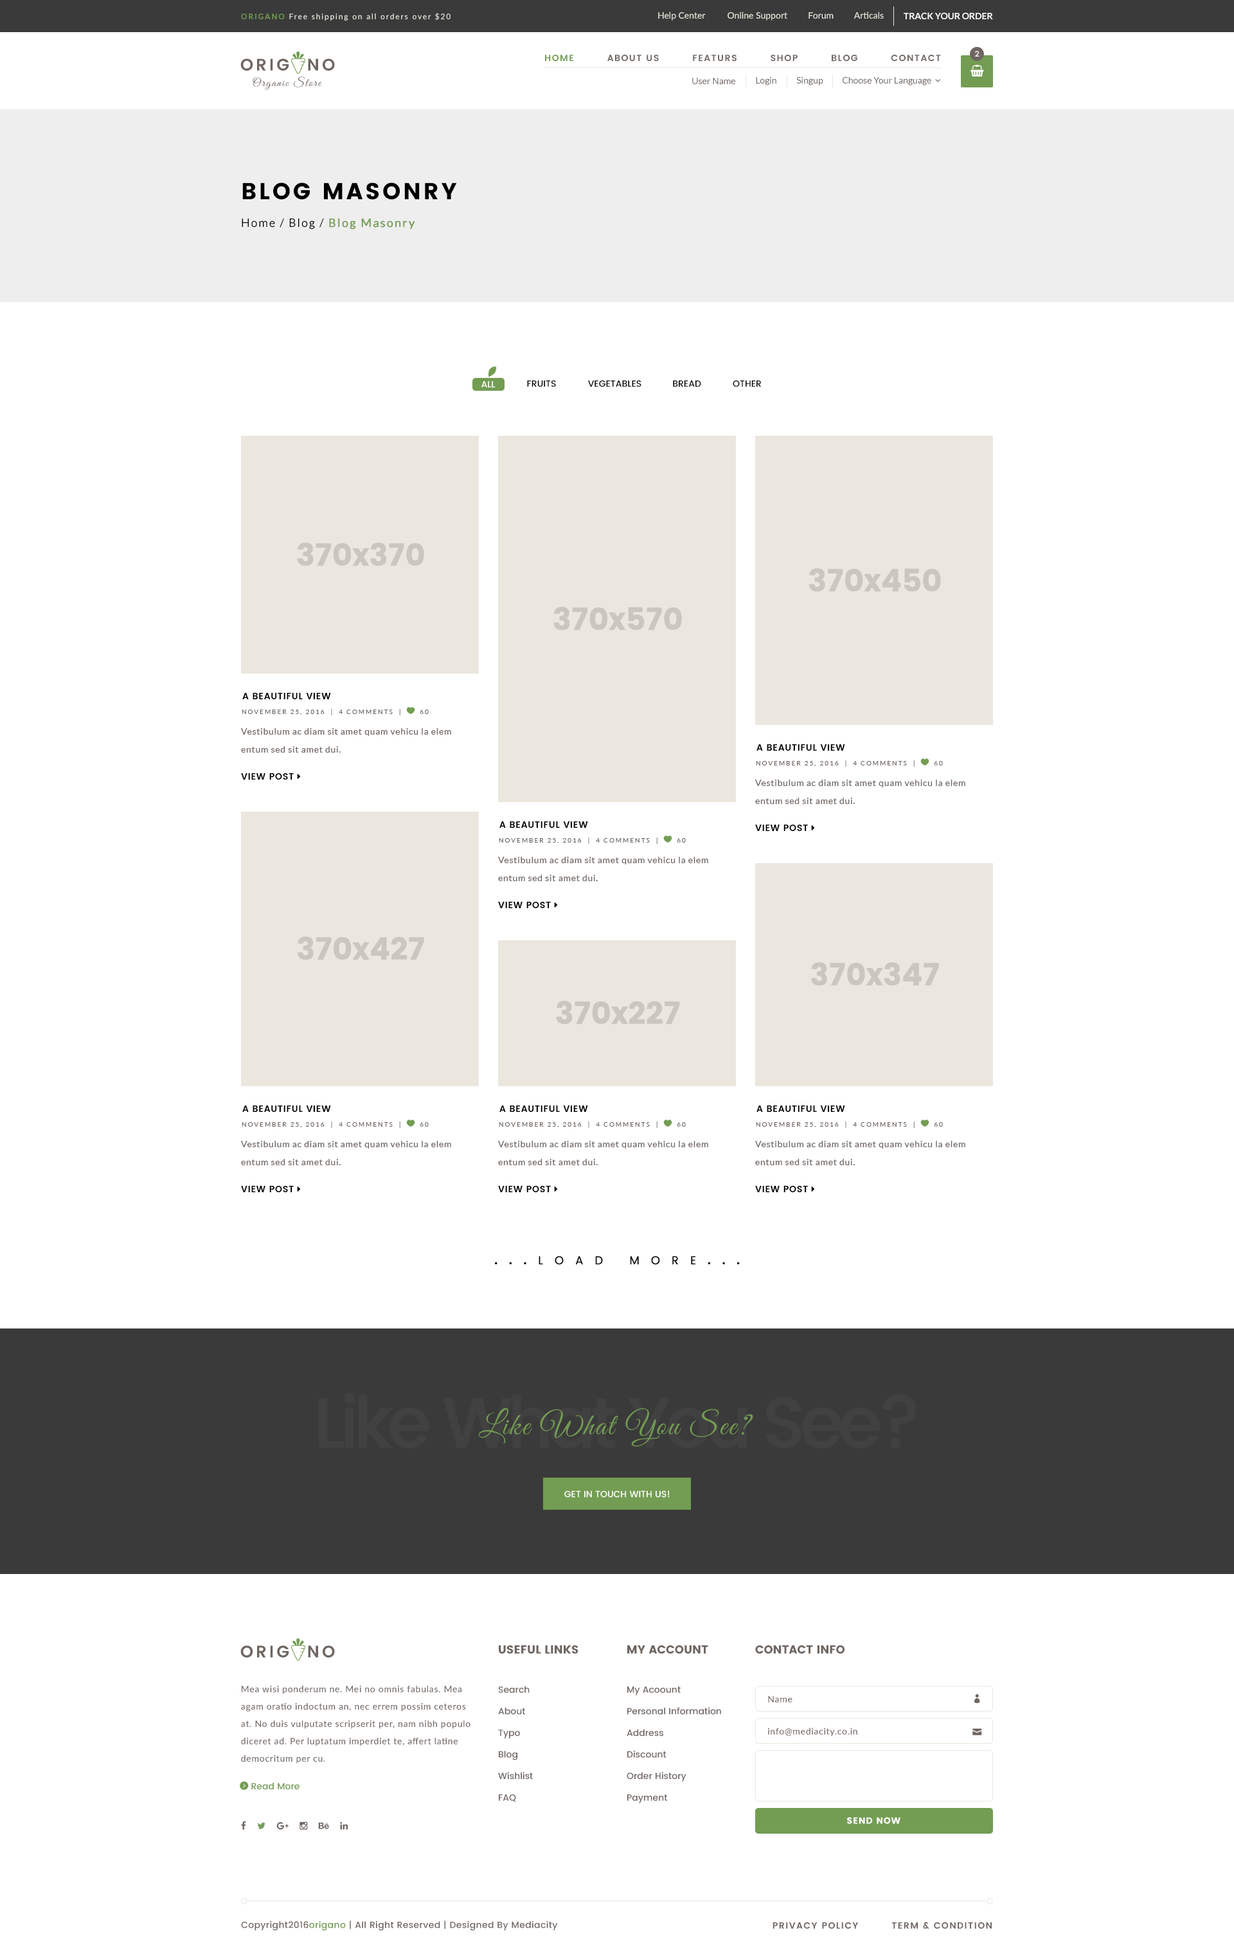
<style>
.page{position:relative;width:1234px;height:1950px;background:#ffffff}
.page>*{position:absolute;margin:0}
.t1{font:7.7px "Lato-Medium";letter-spacing:0.15em;color:#ebe7de}
.t2{font:7.7px "Lato-Bold";letter-spacing:0.15em;color:#739d52}
.t3{font:9px "Lato-Medium";color:#ebe7de}
.t4{font:9px "Lato-Bold";color:#ffffff;text-transform:uppercase}
.t5{font:7.7px "Poppins-Medium";color:#ffffff}
.t6{font:16.7px "Poppins-SemiBold";letter-spacing:0.15em;color:#6f6661}
.t7{font:9px "Poppins-SemiBold";letter-spacing:0.1em;color:#6f6661;text-transform:uppercase}
.t8{font:9px "Poppins-SemiBold";letter-spacing:0.1em;color:#739d52;text-transform:uppercase}
.t9{font:11.6px "GreatVibes-Regular";letter-spacing:0.102em;color:#6f6661}
.t10{font:9px "Lato-Regular";color:#6f6661}
.t11{font:23.1px "Poppins";letter-spacing:0.1em;color:#000000;text-transform:uppercase}
.t12{font:11.6px "Lato-Regular";letter-spacing:0.1em;color:#000000}
.t13{font:11.6px "Lato-Regular";letter-spacing:0.1em;color:#739d52;font-weight:bold}
.t14{font:9px "Poppins-Medium";color:#ffffff;text-transform:uppercase}
.t15{font:9px "Poppins-Medium";color:#000000;text-transform:uppercase}
.t16{font:30.9px "Poppins";color:#cbc6be}
.t17{font:9px "Poppins-SemiBold";letter-spacing:0.05em;color:#000000;text-transform:uppercase}
.t18{font:6.4px "Lato-Regular";letter-spacing:0.2em;color:#6f6661;text-transform:uppercase}
.t19{font:9px/18px "Lato-Regular";letter-spacing:0.05em;color:#6f6661}
.t20{font:11.6px "Poppins-Regular";letter-spacing:1em;color:#000000;text-transform:uppercase}
.t21{font:11.6px "Poppins";letter-spacing:1em;color:#000000;text-transform:uppercase}
.t22{font:70.7px "Poppins-Medium";letter-spacing:-0.1em;color:#414141;font-weight:bold}
.t23{font:30.9px "GreatVibes-Regular";letter-spacing:0.05em;color:#739d52}
.t24{font:11.6px "Poppins";color:#6f6661;text-transform:uppercase}
.t25{font:9px/17.4px "Lato-Medium";letter-spacing:0.05em;color:#6f6661}
.t26{font:9px "Poppins-Medium";color:#6f6661}
.t27{font:9px "Lato-Medium";letter-spacing:0.05em;color:#6f6661}
.t28{font:9px "Poppins";letter-spacing:0.05em;color:#ffffff;text-transform:uppercase}
.t29{font:9px "Poppins-Medium";letter-spacing:0.025em;color:#6f6661}
.t30{font:9px "Poppins-Medium";letter-spacing:0.025em;color:#739d52}
</style>
<div class="page">
<p class="t1" style="left:241px;top:13px;width:210px;height:8px"><span class="t2">ORIGANO </span>Free shipping on all orders over $20</p>
<p class="t3" style="left:658px;top:12px;width:48px;height:9px">Help Center</p>
<p class="t3" style="left:728px;top:12px;width:60px;height:9px">Online Support</p>
<p class="t3" style="left:809px;top:12px;width:25px;height:7px">Forum</p>
<p class="t3" style="left:854px;top:12px;width:30px;height:7px">Articals</p>
<p class="t4" style="left:904px;top:12px;width:89px;height:7px">Track Your Order</p>
<p class="t5" style="left:975px;top:51px;width:5px;height:6px">2</p>
<p class="t6" style="left:240px;top:59px;width:95px;height:12px">ORIG  NO</p>
<p class="t7" style="left:545px;top:55px;width:396px;height:6px"><span class="t8">Home         </span>About Us         Featurs         Shop         Blog         Contact</p>
<p class="t9" style="left:253px;top:76px;width:69px;height:14px">Organic Store</p>
<p class="t10" style="left:692px;top:78px;width:43px;height:6px">User Name</p>
<p class="t10" style="left:756px;top:76px;width:21px;height:10px">Login</p>
<p class="t10" style="left:797px;top:76px;width:27px;height:10px">Singup</p>
<p class="t11" style="left:242px;top:183px;width:215px;height:17px">Blog Masonry</p>
<p class="t12" style="left:242px;top:218px;width:173px;height:12px">Home / Blog / <span class="t13">Blog Masonry</span></p>
<p class="t14" style="left:482px;top:381px;width:14px;height:7px">All</p>
<p class="t15" style="left:527px;top:381px;width:29px;height:6px">Fruits</p>
<p class="t15" style="left:588px;top:381px;width:54px;height:6px">Vegetables</p>
<p class="t15" style="left:673px;top:381px;width:28px;height:6px">Bread</p>
<p class="t15" style="left:733px;top:381px;width:28px;height:6px">Other</p>
<p class="t16" style="left:297px;top:543px;width:127px;height:23px">370x370</p>
<p class="t16" style="left:809px;top:568px;width:132px;height:24px">370x450</p>
<p class="t16" style="left:554px;top:607px;width:128px;height:24px">370x570</p>
<p class="t17" style="left:242px;top:693px;width:89px;height:6px">A BEAUTIFUL VIEW</p>
<p class="t18" style="left:242px;top:709px;width:187px;height:7px">November 25, 2016  |  4 comments  |       60</p>
<p class="t19" style="left:240px;top:728px;width:211px;height:25px">Vestibulum ac diam sit amet quam vehicu la elem entum sed sit amet dui.</p>
<p class="t17" style="left:757px;top:744px;width:88px;height:7px">A BEAUTIFUL VIEW</p>
<p class="t18" style="left:756px;top:760px;width:187px;height:7px">November 25, 2016  |  4 comments  |       60</p>
<p class="t19" style="left:755px;top:780px;width:211px;height:24px">Vestibulum ac diam sit amet quam vehicu la elem entum sed sit amet dui.</p>
<p class="t17" style="left:500px;top:822px;width:88px;height:6px">A BEAUTIFUL VIEW</p>
<p class="t18" style="left:499px;top:838px;width:187px;height:6px">November 25, 2016  |  4 comments  |       60</p>
<p class="t19" style="left:498px;top:857px;width:210px;height:24px">Vestibulum ac diam sit amet quam vehicu la elem entum sed sit amet dui.</p>
<p class="t16" style="left:298px;top:937px;width:126px;height:23px">370x427</p>
<p class="t16" style="left:811px;top:962px;width:128px;height:24px">370x347</p>
<p class="t16" style="left:556px;top:1001px;width:124px;height:24px">370x227</p>
<p class="t17" style="left:242px;top:1106px;width:89px;height:6px">A BEAUTIFUL VIEW</p>
<p class="t17" style="left:500px;top:1106px;width:88px;height:6px">A BEAUTIFUL VIEW</p>
<p class="t17" style="left:757px;top:1106px;width:88px;height:6px">A BEAUTIFUL VIEW</p>
<p class="t18" style="left:242px;top:1122px;width:187px;height:6px">November 25, 2016  |  4 comments  |       60</p>
<p class="t18" style="left:499px;top:1122px;width:187px;height:6px">November 25, 2016  |  4 comments  |       60</p>
<p class="t18" style="left:756px;top:1122px;width:187px;height:6px">November 25, 2016  |  4 comments  |       60</p>
<p class="t19" style="left:240px;top:1141px;width:211px;height:25px">Vestibulum ac diam sit amet quam vehicu la elem entum sed sit amet dui.</p>
<p class="t19" style="left:498px;top:1141px;width:210px;height:25px">Vestibulum ac diam sit amet quam vehicu la elem entum sed sit amet dui.</p>
<p class="t19" style="left:755px;top:1141px;width:211px;height:25px">Vestibulum ac diam sit amet quam vehicu la elem entum sed sit amet dui.</p>
<p class="t20" style="left:495px;top:1256px;width:245px;height:9px"><span class="t21">...</span>Load More<span class="t21">...</span></p>
<p class="t22" style="left:318px;top:1393px;width:598px;height:56px">Like What You See?</p>
<p class="t23" style="left:478px;top:1408px;width:275px;height:39px">Like What You See?</p>
<p class="t14" style="left:564px;top:1491px;width:106px;height:7px">Get In Touch With Us!</p>
<p class="t6" style="left:240px;top:1646px;width:95px;height:12px">ORIG  NO</p>
<p class="t24" style="left:499px;top:1646px;width:80px;height:8px">Useful Links</p>
<p class="t24" style="left:627px;top:1646px;width:81px;height:8px">My Account</p>
<p class="t24" style="left:755px;top:1646px;width:90px;height:8px">Contact Info</p>
<p class="t25" style="left:241px;top:1686px;width:230px;height:78px">Mea wisi ponderum ne. Mei no omnis fabulas. Mea agam oratio indoctum an, nec errem possim ceteros at. No duis vulputate scripserit per, nam nibh populo diceret ad. Per luptatum imperdiet te, affert latine democritum per cu.</p>
<p class="t26" style="left:498px;top:1686px;width:35px;height:117px">Search<br><br>About<br><br>Typo<br><br>Blog<br><br>Wishlist<br><br>FAQ</p>
<p class="t26" style="left:627px;top:1687px;width:94px;height:117px">My Acoount<br><br>Personal Information<br><br>Address<br><br>Discount<br><br>Order History<br><br>Payment</p>
<p class="t27" style="left:768px;top:1696px;width:25px;height:7px">Name</p>
<p class="t27" style="left:768px;top:1728px;width:90px;height:9px">info@mediacity.co.in</p>
<p class="t28" style="left:847px;top:1817px;width:54px;height:7px">Send Now</p>
<p class="t29" style="left:241px;top:1921px;width:317px;height:10px">Copyright2016<span class="t30">origano </span>| All Right Reserved | Designed By Mediacity</p>
<p class="t7" style="left:773px;top:1922px;width:219px;height:7px">Privacy Policy         Term &amp; Condition</p>
</div>
